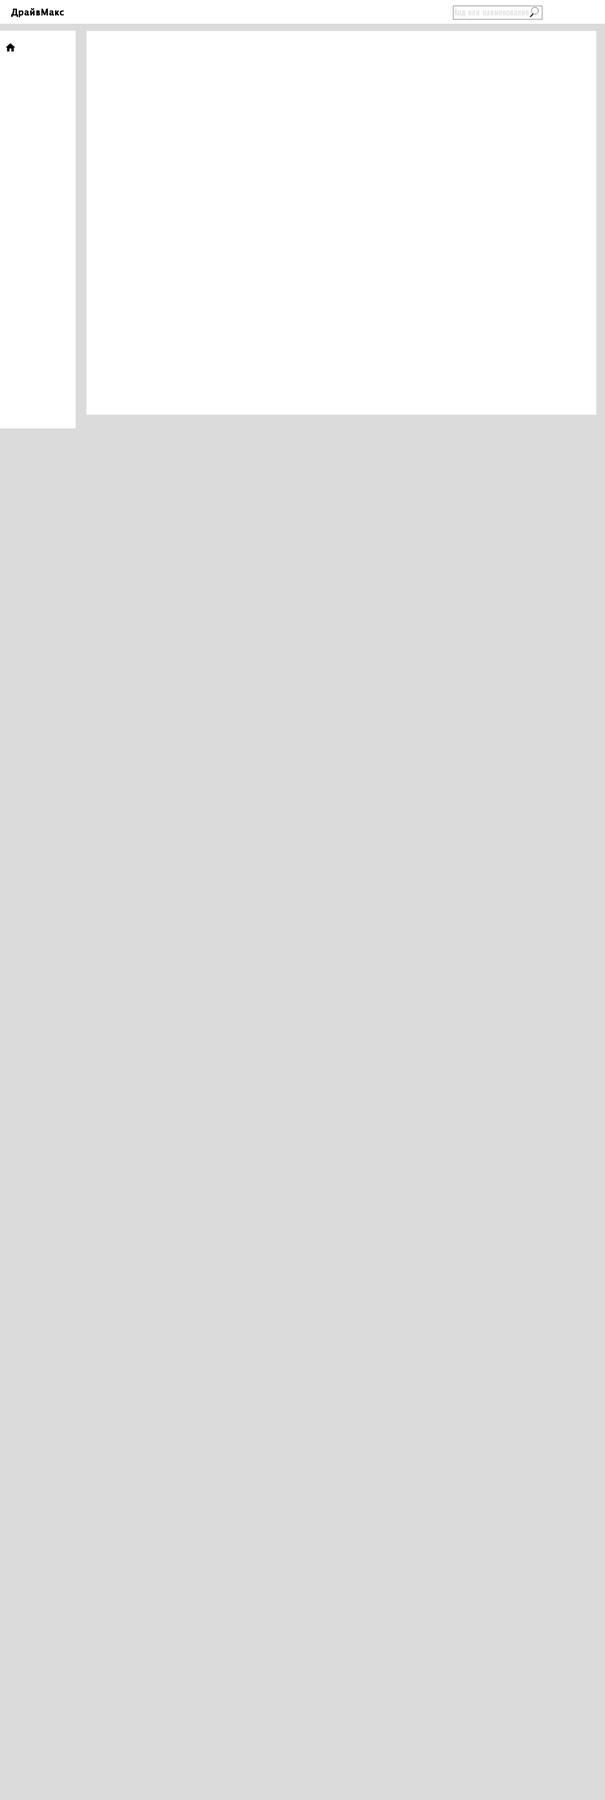
<style>
.page{position:relative;width:605px;height:1800px;background:#dbdbdb}
.page>*{position:absolute;margin:0}
.t1{font:9px "LucidaSansUnicode";color:#000000;font-weight:bold}
.t2{font:9px "LucidaSansUnicode";color:#e5e5e5;font-weight:bold;scale:0.67 1}
</style>
<div class="page">
<p class="t1" style="left:11px;top:8px;width:53px;height:9px">ДрайвМакс</p>
<p class="t2" style="left:454px;top:9px;width:74px;height:8px">Код или наименование</p>
</div>
